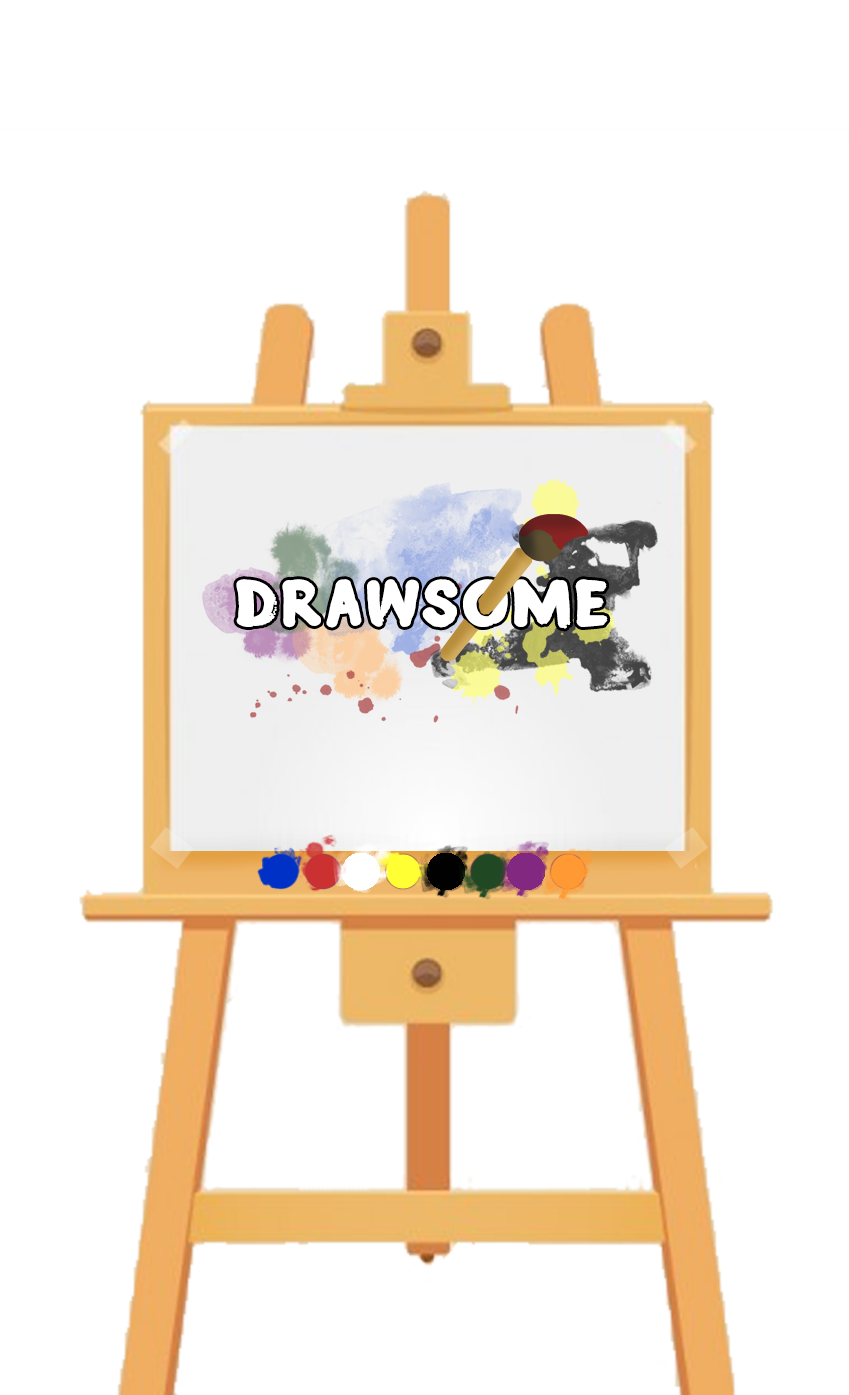
<style>
.page{position:relative;width:849px;height:1395px;background:#ffffff}
.page>*{position:absolute;margin:0}
.t1{font:57.3px "DKInkyFingers";color:#ffffff;font-weight:bold}
</style>
<div class="page">
<p class="t1" style="left:236px;top:579px;width:372px;height:50px">DRAWSOME</p>
</div>
